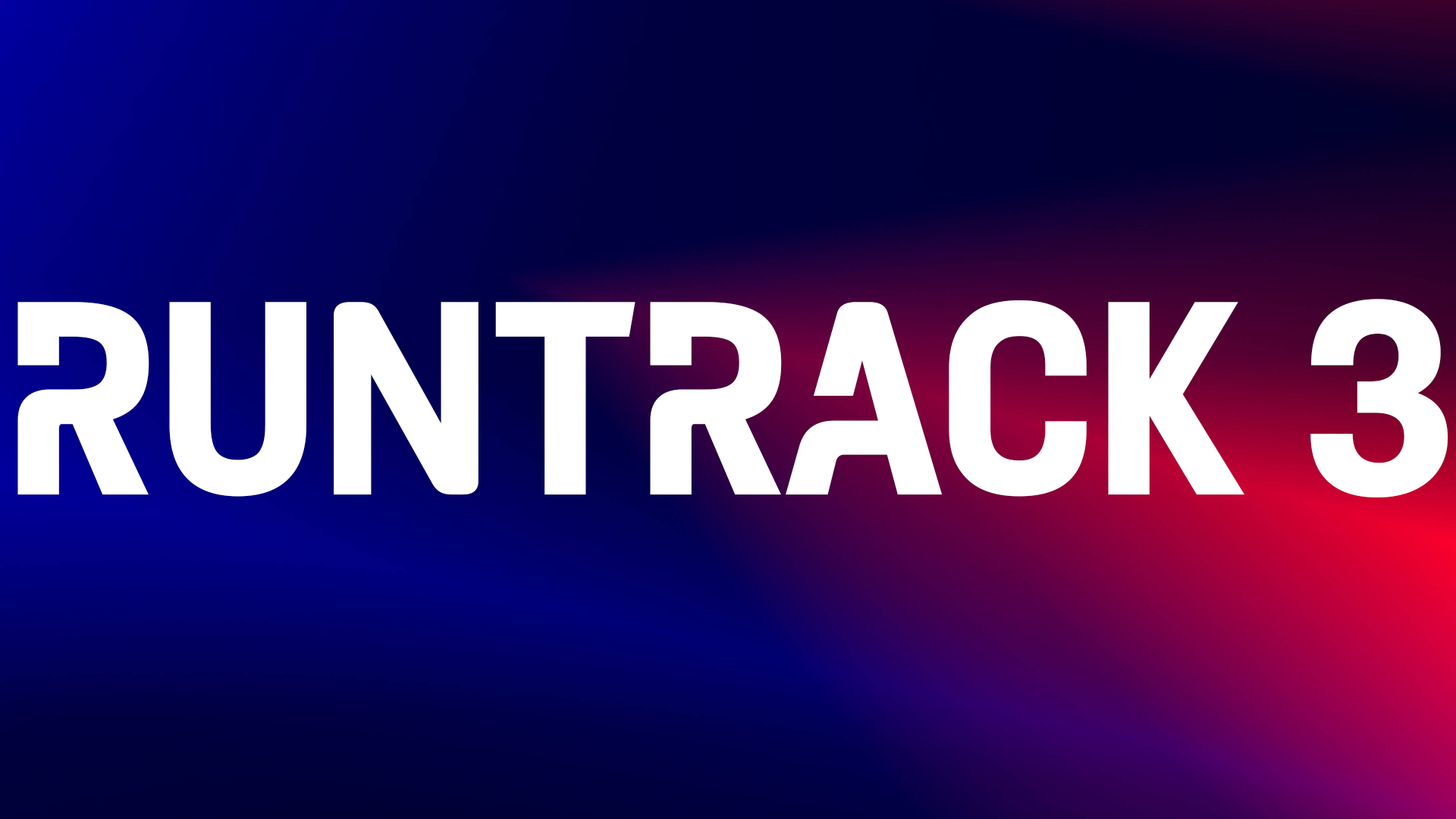
<style>
.page{position:relative;width:1456px;height:819px}
.page>*{position:absolute;margin:0}
.t1{font:297px "MotoGPDisplay-Bold";color:#ffffff}
</style>
<div class="page">
<p class="t1" style="left:17px;top:299px;width:1431px;height:198px">RUNTRACK 3</p>
</div>
